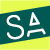
<style>
.page{position:relative;width:50px;height:50px;background:#005952}
.page>*{position:absolute;margin:0}
.t1{font:32.1px "Lombok";letter-spacing:-0.005em;color:#fdfdfd;font-weight:bold}
.t2{font:32.1px "Lombok";letter-spacing:-0.005em;color:#fbffff;font-weight:bold}
</style>
<div class="page">
<p class="t1" style="left:6px;top:12px;width:40px;height:28px;rotate:-9deg">S<span class="t2">A</span></p>
</div>
